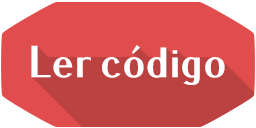
<style>
.page{position:relative;width:256px;height:128px;background:#e04d4c}
.page>*{position:absolute;margin:0}
.t1{font:45px "PfennigBold";color:#ffffff}
</style>
<div class="page">
<p class="t1" style="left:31px;top:45px;width:194px;height:40px">Ler código</p>
</div>
